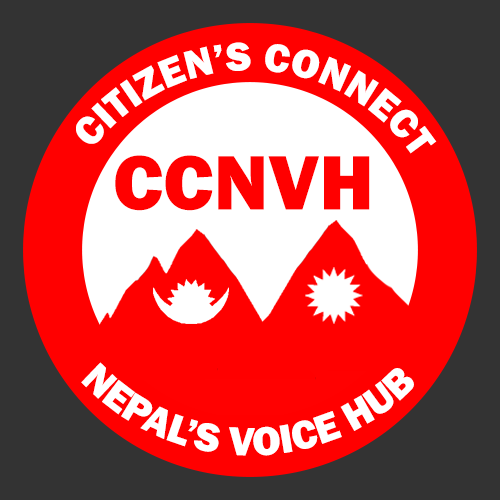
<style>
.page{position:relative;width:500px;height:500px;background:#ff0000}
.page>*{position:absolute;margin:0}
.t1{font:41.4px "FranklinGothic-Heavy";color:#ffffff}
.t2{font:79.8px "FranklinGothic-Heavy";color:#ff0000}
</style>
<div class="page">
<p class="t1" style="left:76px;top:42px;width:361px;height:112px;rotate:94deg">CITIZEN’S CONNECT</p>
<p class="t2" style="left:115px;top:155px;width:255px;height:56px">CCNVH</p>
<p class="t1" style="left:81px;top:362px;width:333px;height:94px;rotate:69deg">NEPAL’S VOICE HUB</p>
</div>
